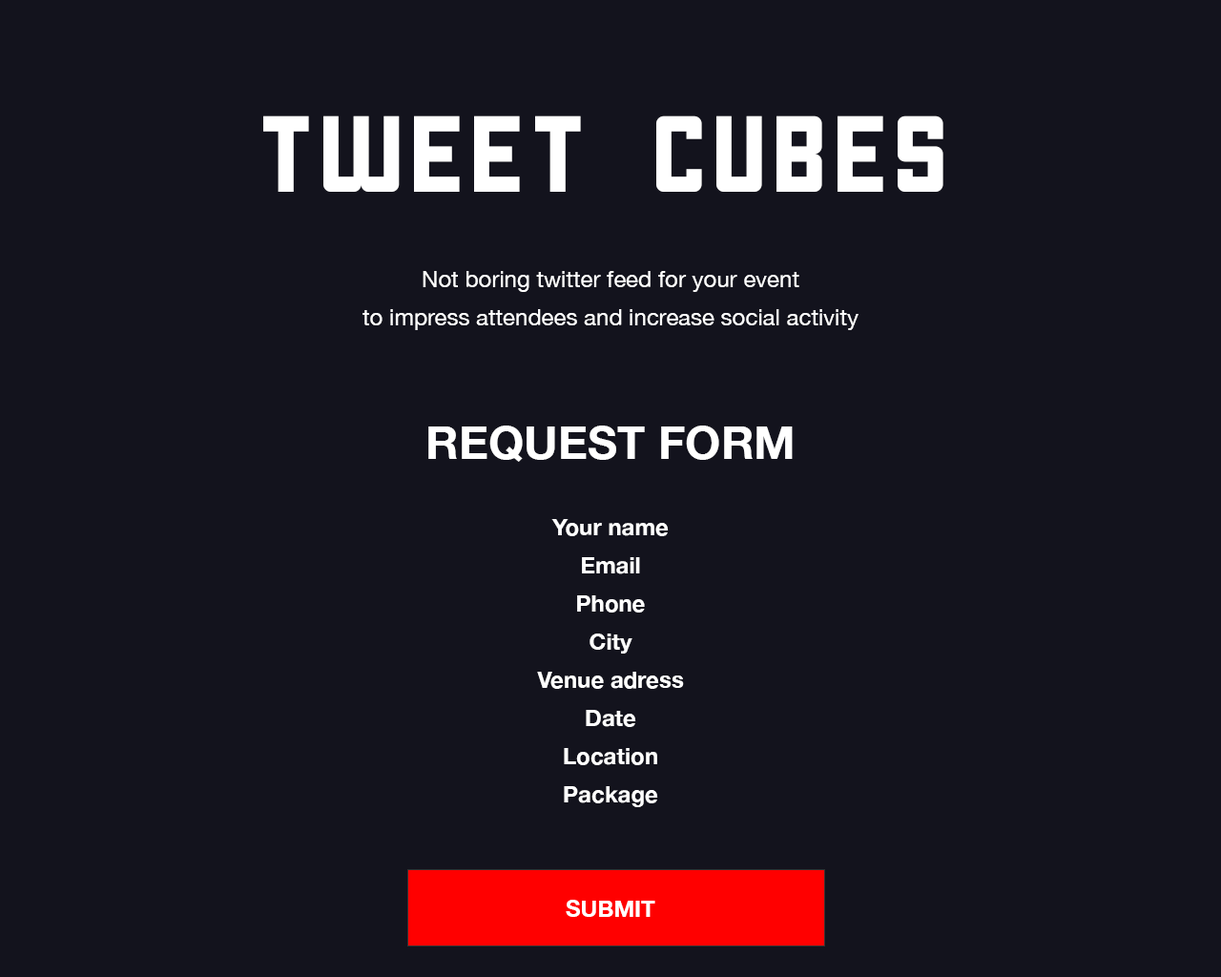
<style>
.page{position:relative;width:1221px;height:977px;background:#13131d}
.page>*{position:absolute;margin:0}
.t1{font:22.9px/19.1px "HelveticaNeue";color:#ffffff}
.t2{font:104.9px/124px "Cornerstone";color:#ffffff}
.t3{font:45.8px/19.1px "HelveticaNeue-Bold";color:#ffffff}
.t4{font:22.9px/19.1px "HelveticaNeue-Bold";color:#ffffff}
.t5{font:22.9px/19.1px "HelveticaNeue-Bold";color:#ffffff;text-decoration:underline}
</style>
<div class="page">
<p class="t1" style="left:263px;top:115px;width:680px;height:802px;text-align:center"><span class="t2">TWEET CUBES<br><br><br></span><br><br>Not boring twitter feed for your event<br><br>to impress attendees and increase social activity<br><br><br><br><br><br><br><span class="t3">REQUEST FORM<br></span><span class="t4"><br><br><br>Your name<br><br>Email<br><br>Phone<br><br>City<br><br>Venue adress<br><br>Date<br><br>Location<br><br>Package<br><br><br><br><br><br>SUBMIT<br><br><br><br><br><br><br><br><br><br><br><br><br><br><br><br><br><br><br><br><br></span><span class="t5">Become a partner in your city</span></p>
</div>
